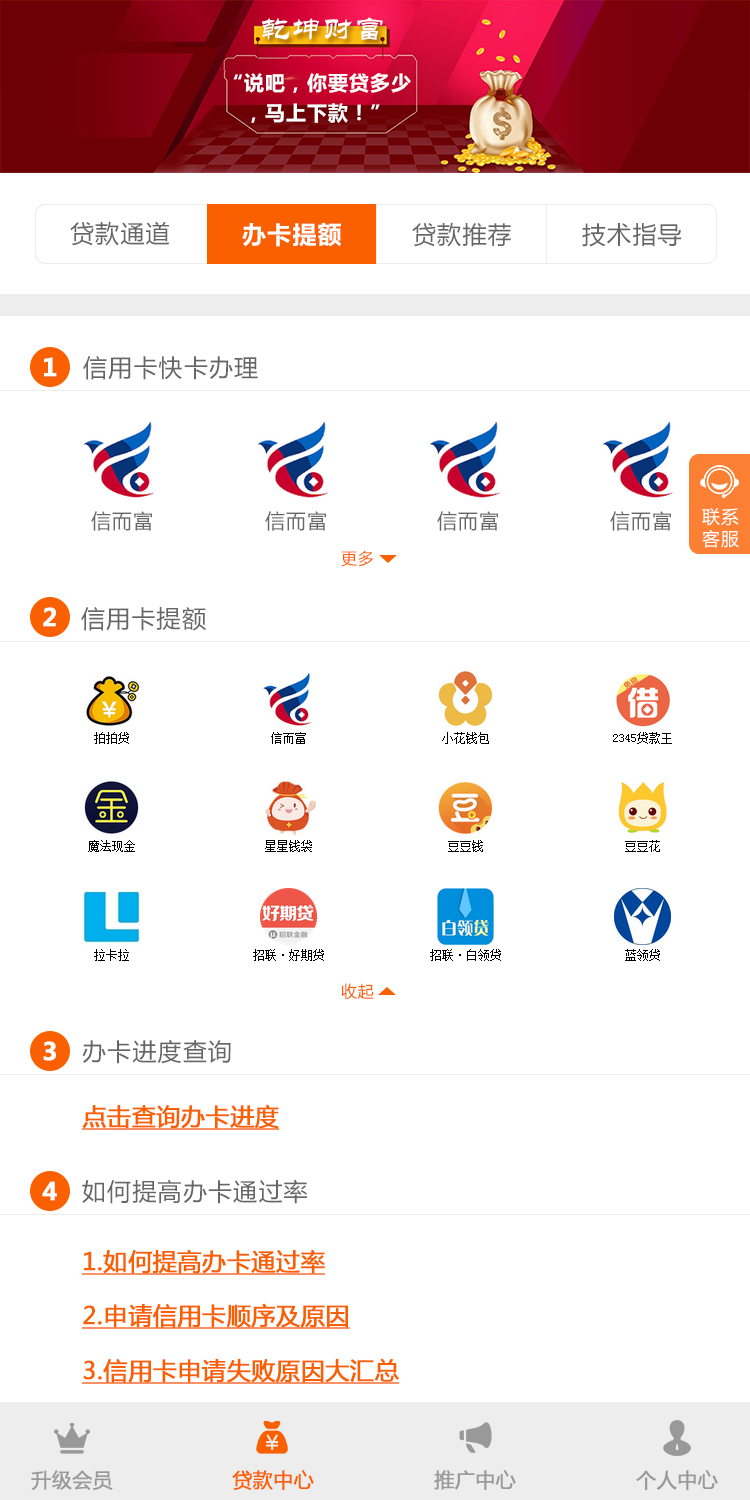
<style>
.page{position:relative;width:750px;height:1500px;background:#ffffff}
.page>*{position:absolute;margin:0}
.t1{font:30px "STLiti";letter-spacing:0.05em;color:#ffffff}
.t2{font:20px/30px "MicrosoftYaHei-Bold";letter-spacing:0.05em;color:#ffffff}
.t3{font:24px "MicrosoftYaHei";letter-spacing:0.05em;color:#666666}
.t4{font:24px "MicrosoftYaHei-Bold";letter-spacing:0.05em;color:#ffffff}
.t5{font:24px "MicrosoftYaHei-Bold";color:#ffffff;font-weight:bold}
.t6{font:18px "MicrosoftYaHei";letter-spacing:0.05em;color:#ffffff}
.t7{font:20px "MicrosoftYaHei";letter-spacing:0.05em;color:#666666}
.t8{font:16px "MicrosoftYaHei";letter-spacing:0.05em;color:#fb6000}
.t9{font:24px "MicrosoftYaHei";color:#fb6000;font-weight:bold;text-decoration:underline}
.t10{font:20px "MicrosoftYaHei";color:#999999;font-weight:bold}
.t11{font:20px "MicrosoftYaHei";color:#fb6000;font-weight:bold}
</style>
<div class="page">
<p class="t1" style="left:262px;top:17px;width:121px;height:23px">乾坤财富</p>
<p class="t2" style="left:233px;top:73px;width:178px;height:50px;text-align:center">“说吧，你要贷多少<br>，马上下款！”</p>
<p class="t3" style="left:70px;top:221px;width:100px;height:25px">贷款通道</p>
<p class="t4" style="left:242px;top:222px;width:99px;height:25px">办卡提额</p>
<p class="t3" style="left:412px;top:222px;width:99px;height:25px">贷款推荐</p>
<p class="t3" style="left:582px;top:223px;width:100px;height:24px">技术指导</p>
<p class="t5" style="left:44px;top:357px;width:13px;height:20px">1</p>
<p class="t3" style="left:83px;top:356px;width:175px;height:24px">信用卡快卡办理</p>
<p class="t6" style="left:702px;top:508px;width:37px;height:40px">联系<br>客服</p>
<p class="t7" style="left:91px;top:511px;width:61px;height:20px">信而富</p>
<p class="t7" style="left:265px;top:511px;width:61px;height:20px">信而富</p>
<p class="t7" style="left:437px;top:511px;width:61px;height:20px">信而富</p>
<p class="t7" style="left:610px;top:511px;width:61px;height:20px">信而富</p>
<p class="t8" style="left:341px;top:550px;width:32px;height:17px">更多</p>
<p class="t5" style="left:43px;top:607px;width:13px;height:20px">2</p>
<p class="t3" style="left:81px;top:607px;width:125px;height:24px">信用卡提额</p>
<p class="t8" style="left:341px;top:983px;width:33px;height:17px">收起</p>
<p class="t5" style="left:43px;top:1041px;width:13px;height:20px">3</p>
<p class="t3" style="left:82px;top:1039px;width:149px;height:25px">办卡进度查询</p>
<p class="t9" style="left:82px;top:1104px;width:198px;height:26px">点击查询办卡进度</p>
<p class="t5" style="left:42px;top:1181px;width:15px;height:20px">4</p>
<p class="t3" style="left:82px;top:1179px;width:225px;height:25px">如何提高办卡通过率</p>
<p class="t9" style="left:82px;top:1249px;width:243px;height:26px">1.如何提高办卡通过率</p>
<p class="t9" style="left:82px;top:1303px;width:268px;height:26px">2.申请信用卡顺序及原因</p>
<p class="t9" style="left:82px;top:1358px;width:317px;height:26px">3.信用卡申请失败原因大汇总</p>
<p class="t10" style="left:31px;top:1470px;width:82px;height:20px">升级会员</p>
<p class="t11" style="left:232px;top:1470px;width:82px;height:20px">贷款中心</p>
<p class="t10" style="left:434px;top:1470px;width:82px;height:20px">推广中心</p>
<p class="t10" style="left:636px;top:1470px;width:82px;height:20px">个人中心</p>
</div>
